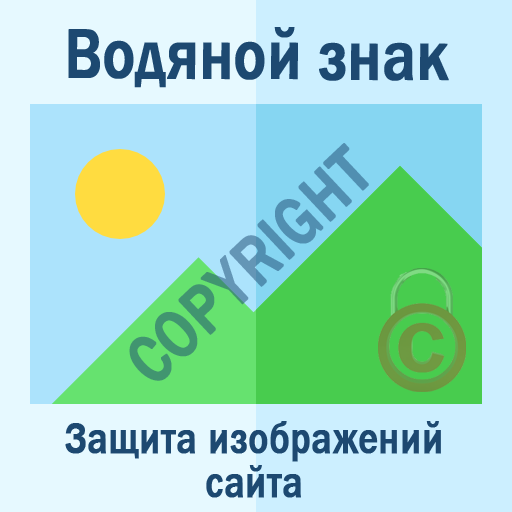
<style>
.page{position:relative;width:512px;height:512px;background:#e6f9ff}
.page>*{position:absolute;margin:0}
.t1{font:72px "FranklinGothic-Medium";color:#1d4971;font-weight:bold;scale:0.83 1}
.t2{font:69.8px "FranklinGothic-Medium";font-weight:bold;scale:0.83 1}
.t3{font:45px/11.2px "FranklinGothic-Medium";color:#1d4971;font-weight:bold;scale:0.83 1}
</style>
<div class="page">
<p class="t1" style="left:68px;top:27px;width:381px;height:61px">Водяной знак</p>
<p class="t2" style="left:129px;top:143px;width:240px;height:238px;rotate:-43deg">COPYRIGHT</p>
<p class="t3" style="left:65px;top:421px;width:376px;height:77px;text-align:center">Защита изображений<br><br><br><br>сайта</p>
</div>
